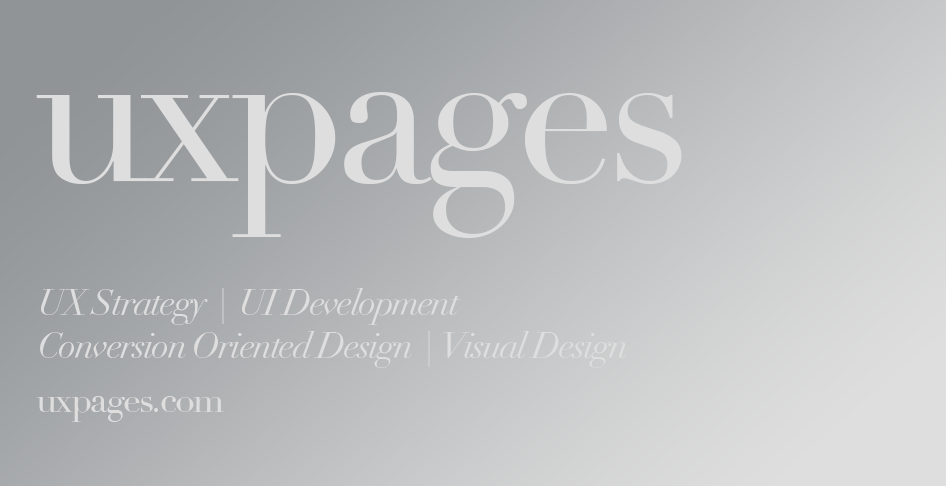
<style>
.page{position:relative;width:946px;height:486px}
.page>*{position:absolute;margin:0}
.t1{font:200px "Didot";letter-spacing:-0.05em;color:#dedede}
.t2{font:36px "Didot-Italic";letter-spacing:-0.05em;color:#dedede}
.t3{font:36px "Didot";letter-spacing:-0.05em;color:#dedede}
</style>
<div class="page">
<p class="t1" style="left:36px;top:92px;width:646px;height:146px">uxpages</p>
<p class="t2" style="left:40px;top:288px;width:587px;height:80px">UX Strategy  |  UI Development   <br>Conversion Oriented Design  |  Visual Design</p>
<p class="t3" style="left:36px;top:396px;width:188px;height:26px">uxpages.com</p>
</div>
